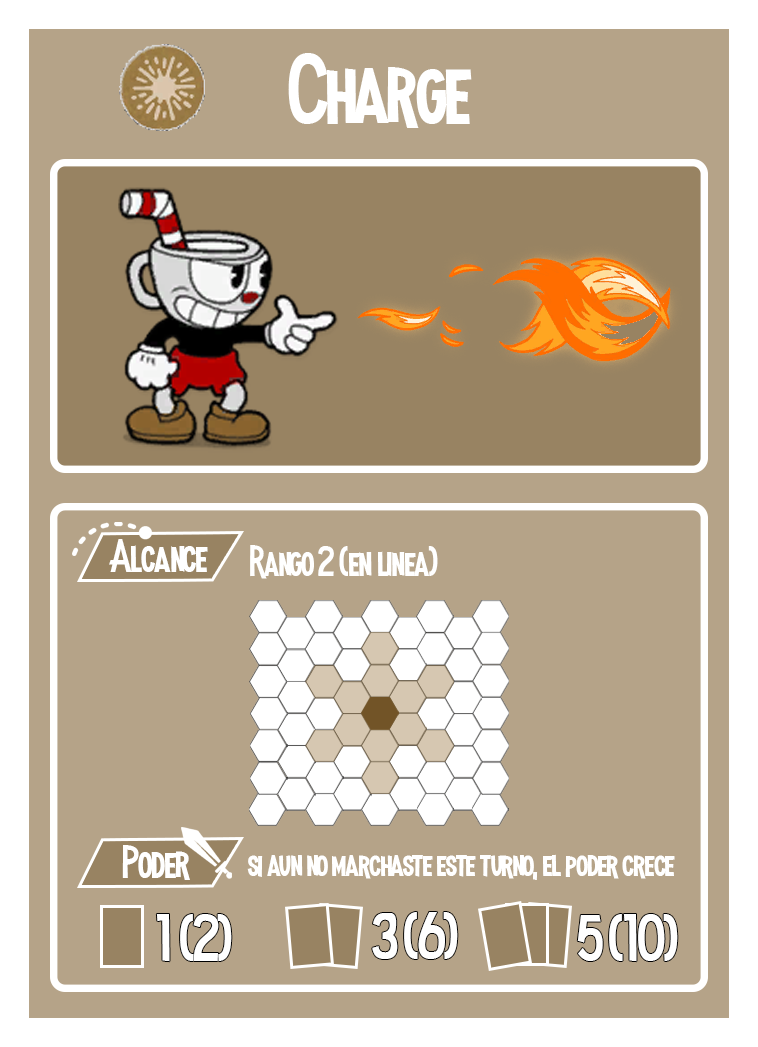
<style>
.page{position:relative;width:758px;height:1047px;background:#b5a388}
.page>*{position:absolute;margin:0}
.t1{font:100px "MadnessHyperactive";color:#ffffff}
.t2{font:45.8px "MadnessHyperactive";color:#ffffff}
.t3{font:41.7px "MadnessHyperactive";color:#ffffff}
.t4{font:37.5px "MadnessHyperactive";color:#ffffff}
.t5{font:66.3px "MadnessHyperactive";color:#ffffff}
</style>
<div class="page">
<p class="t1" style="left:288px;top:53px;width:184px;height:75px">Charge</p>
<p class="t2" style="left:109px;top:539px;width:99px;height:33px">Alcance</p>
<p class="t3" style="left:250px;top:545px;width:188px;height:34px">Rango 2 (en linea)</p>
<p class="t2" style="left:122px;top:845px;width:68px;height:35px">Poder</p>
<p class="t4" style="left:247px;top:854px;width:428px;height:26px">si aun no marchaste este turno, el poder crece</p>
<p class="t5" style="left:156px;top:914px;width:76px;height:48px">1 (2)</p>
<p class="t5" style="left:372px;top:912px;width:86px;height:47px">3 (6)</p>
<p class="t5" style="left:577px;top:914px;width:101px;height:48px">5 (10)</p>
</div>
